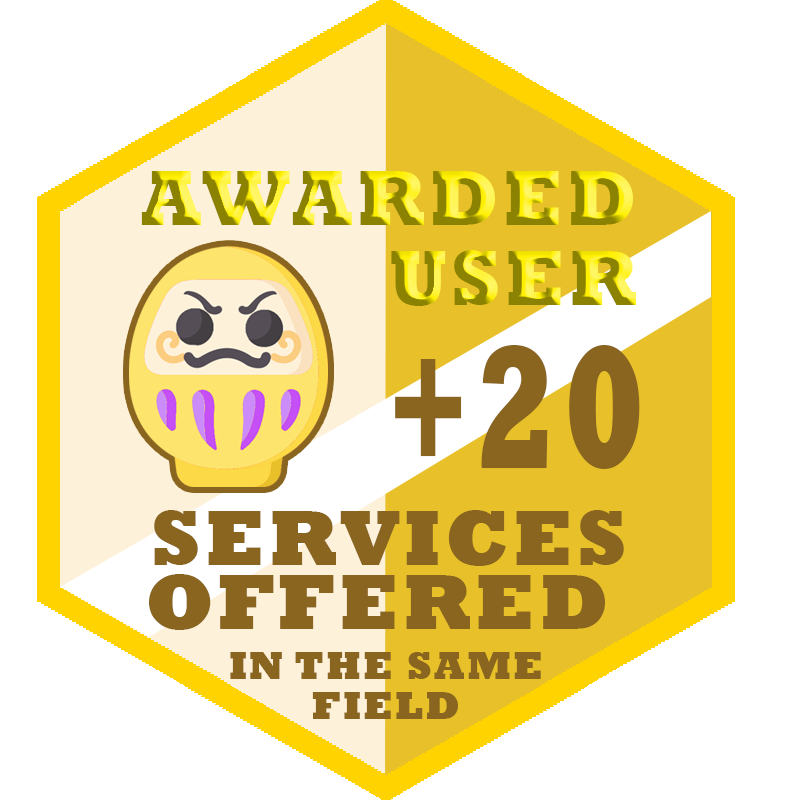
<style>
.page{position:relative;width:800px;height:800px;background:#ffffff}
.page>*{position:absolute;margin:0}
.t1{font:80px/80px "Rockwell-ExtraBold";letter-spacing:0.05em}
.t2{font:176.8px "Rockwell-ExtraBold";letter-spacing:0.05em;color:#89651f;scale:0.68 1}
.t3{font:80px/64px "Rockwell-ExtraBold";letter-spacing:0.05em;color:#89651f}
.t4{font:40px/40px "Rockwell-ExtraBold";letter-spacing:0.05em;color:#89651f}
</style>
<div class="page">
<p class="t1" style="left:141px;top:171px;width:495px;height:135px;text-align:right">AWARDED<br>USER</p>
<p class="t2" style="left:395px;top:345px;width:245px;height:124px">+20</p>
<p class="t3" style="left:149px;top:510px;width:475px;height:120px">SERVICES<br>  OFFERED</p>
<p class="t4" style="left:230px;top:652px;width:311px;height:67px;text-align:center">IN THE SAME<br>FIELD</p>
</div>
